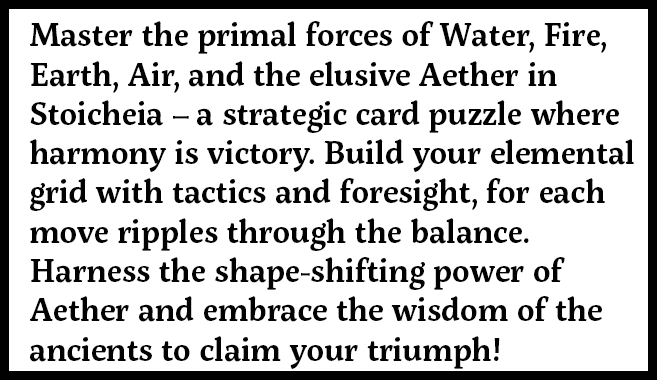
<style>
.page{position:relative;width:657px;height:380px;background:#ffffff}
.page>*{position:absolute;margin:0}
.t1{font:32.8px "ServusSlab-SemiBold";color:#020202;scale:0.97 1}
</style>
<div class="page">
<p class="t1" style="left:30px;top:21px;width:604px;height:348px">Master the primal forces of Water, Fire, Earth, Air, and the elusive Aether in Stoicheia – a strategic card puzzle where harmony is victory. Build your elemental grid with tactics and foresight, for each move ripples through the balance. Harness the shape-shifting power of Aether and embrace the wisdom of the ancients to claim your triumph!</p>
</div>
